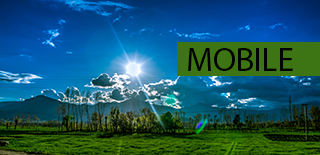
<style>
.page{position:relative;width:320px;height:155px}
.page>*{position:absolute;margin:0}
.t1{font:33.3px "MyriadPro-Regular";color:#000000}
</style>
<div class="page">
<p class="t1" style="left:188px;top:48px;width:105px;height:23px">MOBILE</p>
</div>
